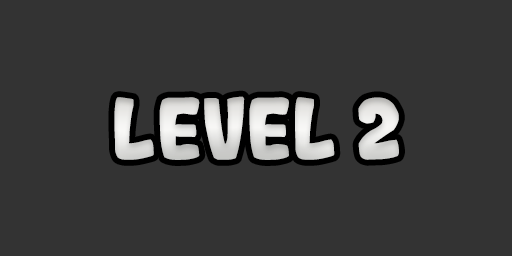
<style>
.page{position:relative;width:512px;height:256px;background:#333333}
.page>*{position:absolute;margin:0}
.t1{font:83.3px "Gogono-Cocoa-Mochi";color:#dcdcda}
</style>
<div class="page">
<p class="t1" style="left:114px;top:96px;width:285px;height:64px">LEVEL 2</p>
</div>
